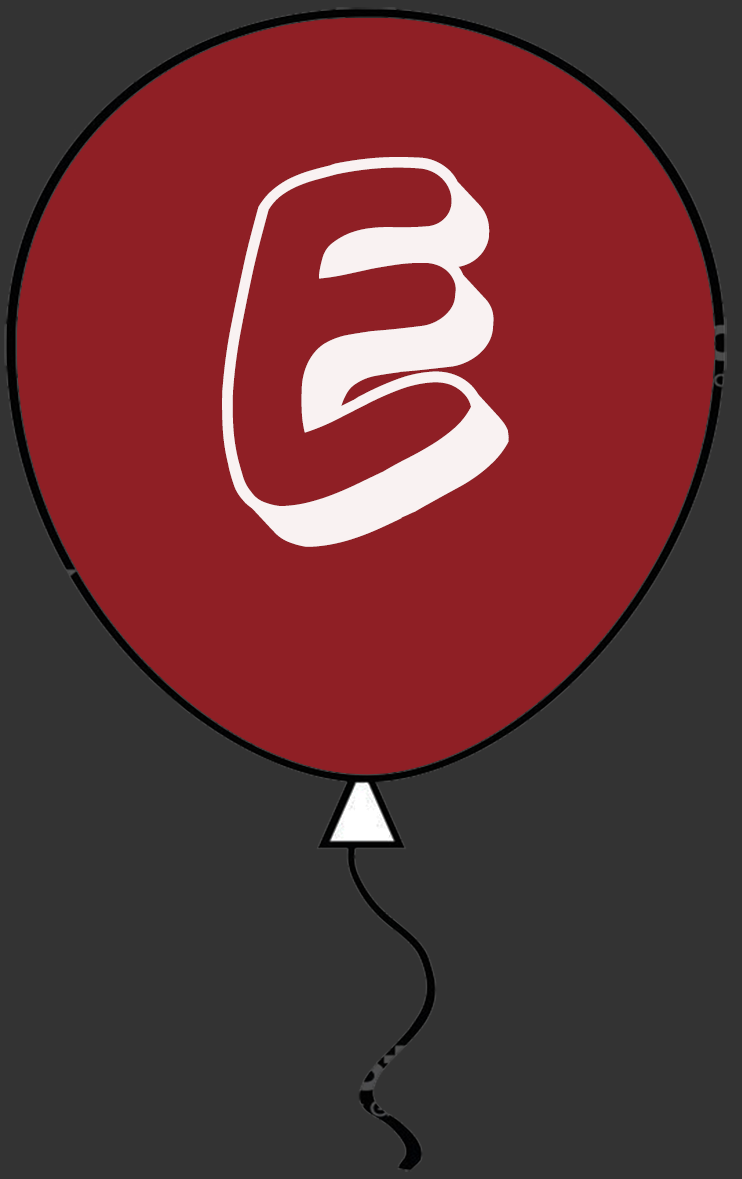
<style>
.page{position:relative;width:742px;height:1179px;background:#333333}
.page>*{position:absolute;margin:0}
.t1{font:500px "ActionManShaded";color:#f9f2f2}
</style>
<div class="page">
<p class="t1" style="left:222px;top:157px;width:287px;height:390px">e</p>
</div>
